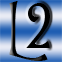
<style>
.page{position:relative;width:62px;height:62px}
.page>*{position:absolute;margin:0}
.t1{font:58px "TriniganFG";color:#000000}
</style>
<div class="page">
<p class="t1" style="left:9px;top:1px;width:39px;height:60px">L</p>
<p class="t1" style="left:26px;top:3px;width:24px;height:45px">2</p>
</div>
